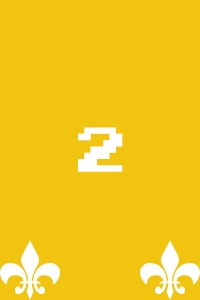
<style>
.page{position:relative;width:200px;height:300px;background:#f1c40f}
.page>*{position:absolute;margin:0}
.t1{font:50.4px "PressStart2P-Regular";color:#ffffff}
</style>
<div class="page">
<p class="t1" style="left:78px;top:127px;width:45px;height:45px">2</p>
</div>
